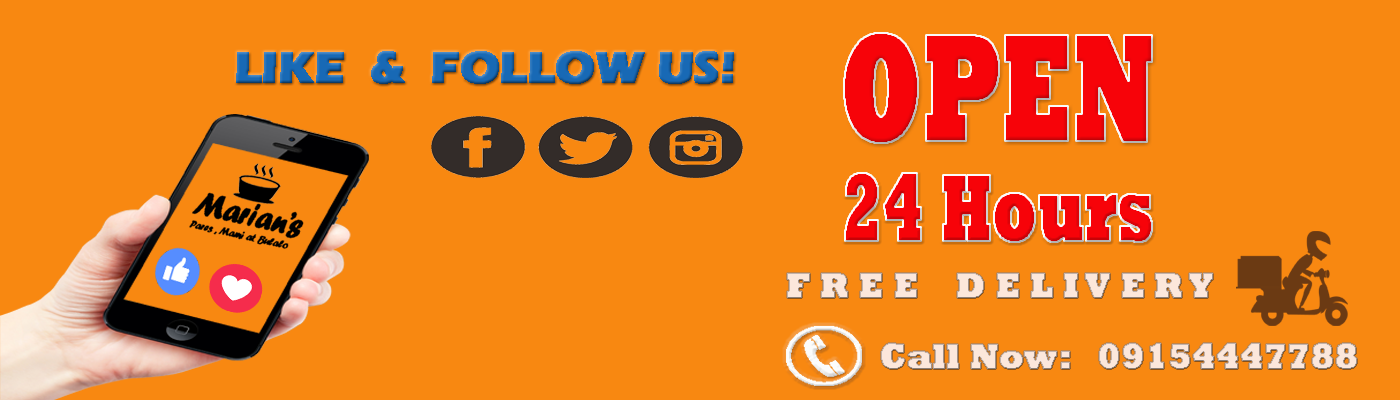
<style>
.page{position:relative;width:1400px;height:400px;background:#f88811}
.page>*{position:absolute;margin:0}
.t1{font:153.3px "Rockwell-ExtraBold";color:#f70309;font-weight:bold;scale:0.61 1}
.t2{font:45px "ErasITC-Bold";color:#1869b5;font-weight:bold}
.t3{font:95.7px "Rockwell-ExtraBold";color:#f70309;font-weight:bold;scale:0.61 1}
.t4{font:36.2px "Rockwell-ExtraBold";color:#fce7db;font-weight:bold;scale:0.92 1}
</style>
<div class="page">
<p class="t1" style="left:844px;top:33px;width:308px;height:110px">OPEN</p>
<p class="t2" style="left:236px;top:51px;width:498px;height:33px">LIKE  &amp;  FOLLOW US!</p>
<p class="t3" style="left:845px;top:173px;width:307px;height:69px">24 Hours</p>
<p class="t4" style="left:787px;top:273px;width:426px;height:25px">F R E E    D E L I V E R Y</p>
<p class="t4" style="left:881px;top:343px;width:476px;height:26px">Call Now:   09154447788</p>
</div>
